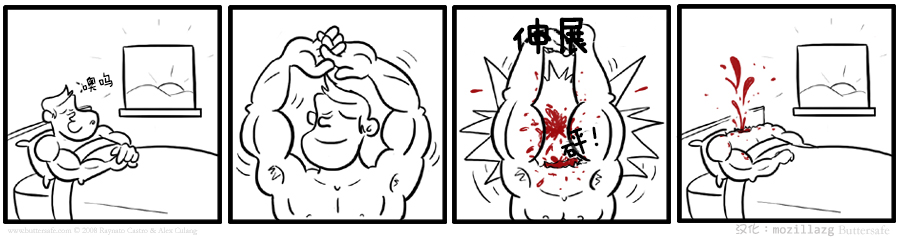
<style>
.page{position:relative;width:900px;height:237px;background:#ffffff}
.page>*{position:absolute;margin:0}
.t1{font:41.7px "FZMWJW--GB1-0";color:#000000;font-weight:bold}
.t2{font:16.7px "FZMWJW--GB1-0";color:#000000}
.t3{font:29.2px "FZMWJW--GB1-0";color:#000000;font-weight:bold}
.t4{font:12.5px "YaHei-Consolas-Hybrid";color:#c6c4c4}
.t5{font:12.5px "DFGirl";color:#c6c4c4}
</style>
<div class="page">
<p class="t1" style="left:513px;top:17px;width:75px;height:38px">伸展</p>
<p class="t2" style="left:82px;top:72px;width:31px;height:20px;rotate:-15deg">噢呜</p>
<p class="t3" style="left:561px;top:126px;width:38px;height:32px;rotate:-19deg">砰！</p>
<p class="t4" style="left:735px;top:223px;width:99px;height:14px"><span class="t5">汉化：</span>mozillazg</p>
</div>
